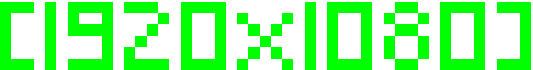
<style>
.page{position:relative;width:533px;height:70px;background:#ffffff}
.page>*{position:absolute;margin:0}
.t1{font:57px "Pixeled";color:#00ff00}
</style>
<div class="page">
<p class="t1" style="left:0px;top:2px;width:531px;height:68px">[1920x1080]</p>
</div>
